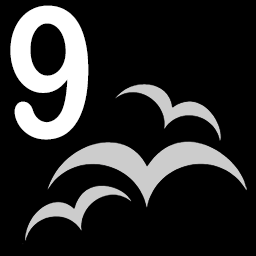
<style>
.page{position:relative;width:256px;height:256px;background:#000000}
.page>*{position:absolute;margin:0}
.t1{font:182.4px "ArialRoundedMTBold";letter-spacing:-0.4em;color:#ffffff;font-variant:small-caps;scale:0.83 1}
</style>
<div class="page">
<p class="t1" style="left:10px;top:5px;width:79px;height:135px">9</p>
</div>
